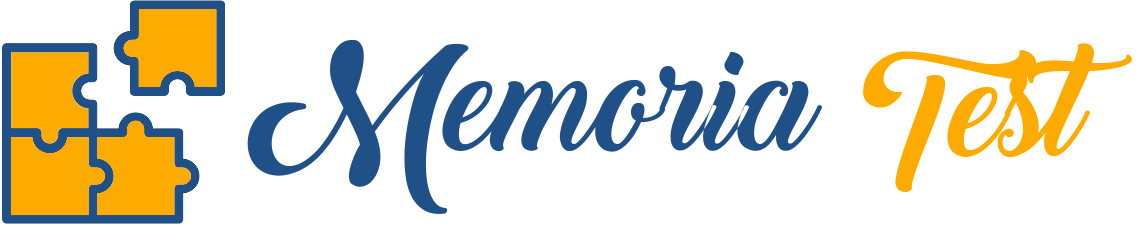
<style>
.page{position:relative;width:1140px;height:225px;background:#ffffff}
.page>*{position:absolute;margin:0}
.t1{font:140px "BacktoBlackDemo";color:#1f5088}
.t2{font:140px "BacktoBlackDemo";color:#fdab00}
</style>
<div class="page">
<p class="t1" style="left:247px;top:40px;width:576px;height:174px">Memoria</p>
<p class="t2" style="left:863px;top:43px;width:269px;height:149px">Test</p>
</div>
